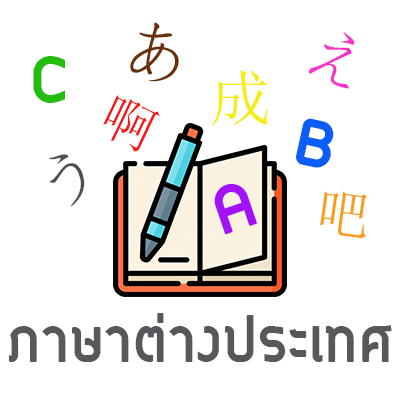
<style>
.page{position:relative;width:400px;height:400px;background:#ffffff}
.page>*{position:absolute;margin:0}
.t1{font:72.4px "SimSun";color:#6a2f08}
.t2{font:68.8px "SimSun";color:#f934c8}
.t3{font:83.3px "Circular-Bold";color:#24be10}
.t4{font:61.8px "SimSun";color:#f5ed15}
.t5{font:53.8px "SimSun";color:#fa1616}
.t6{font:83.3px "Circular-Bold";color:#0b5ff7}
.t7{font:66.8px "SimSun";color:#505152}
.t8{font:83.3px "Circular-Bold";color:#a412f7}
.t9{font:55.4px "SimSun";color:#fa9e19}
.t10{font:83.3px "Circular-Bold";color:#56585b}
</style>
<div class="page">
<p class="t1" style="left:130px;top:22px;width:49px;height:60px;rotate:12deg">あ</p>
<p class="t2" style="left:309px;top:32px;width:46px;height:57px;rotate:25deg">え</p>
<p class="t3" style="left:33px;top:56px;width:32px;height:47px">C</p>
<p class="t4" style="left:211px;top:70px;width:57px;height:56px">成</p>
<p class="t5" style="left:103px;top:95px;width:57px;height:57px;rotate:25deg">啊</p>
<p class="t6" style="left:296px;top:118px;width:38px;height:50px;rotate:12deg">B</p>
<p class="t7" style="left:49px;top:154px;width:36px;height:53px;rotate:-26deg">う</p>
<p class="t8" style="left:214px;top:184px;width:43px;height:51px;rotate:-19deg">A</p>
<p class="t9" style="left:320px;top:191px;width:47px;height:47px;rotate:8deg">吧</p>
<p class="t10" style="left:9px;top:313px;width:383px;height:49px">ภาษาต่างประเทศ</p>
</div>
